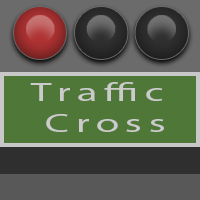
<style>
.page{position:relative;width:200px;height:200px;background:#4f7737}
.page>*{position:absolute;margin:0}
.t1{font:25.6px "MyriadPro-Regular";letter-spacing:0.16em;color:#cbcbcb;scale:1.64 1}
</style>
<div class="page">
<p class="t1" style="left:30px;top:82px;width:134px;height:50px;text-align:center">Traffic<br> Cross</p>
</div>
